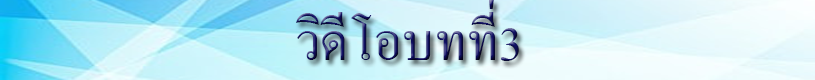
<style>
.page{position:relative;width:815px;height:80px}
.page>*{position:absolute;margin:0}
.t1{font:72px "AngsanaNew"}
</style>
<div class="page">
<p class="t1" style="left:296px;top:0px;width:223px;height:61px">วิดีโอบทที่3</p>
</div>
